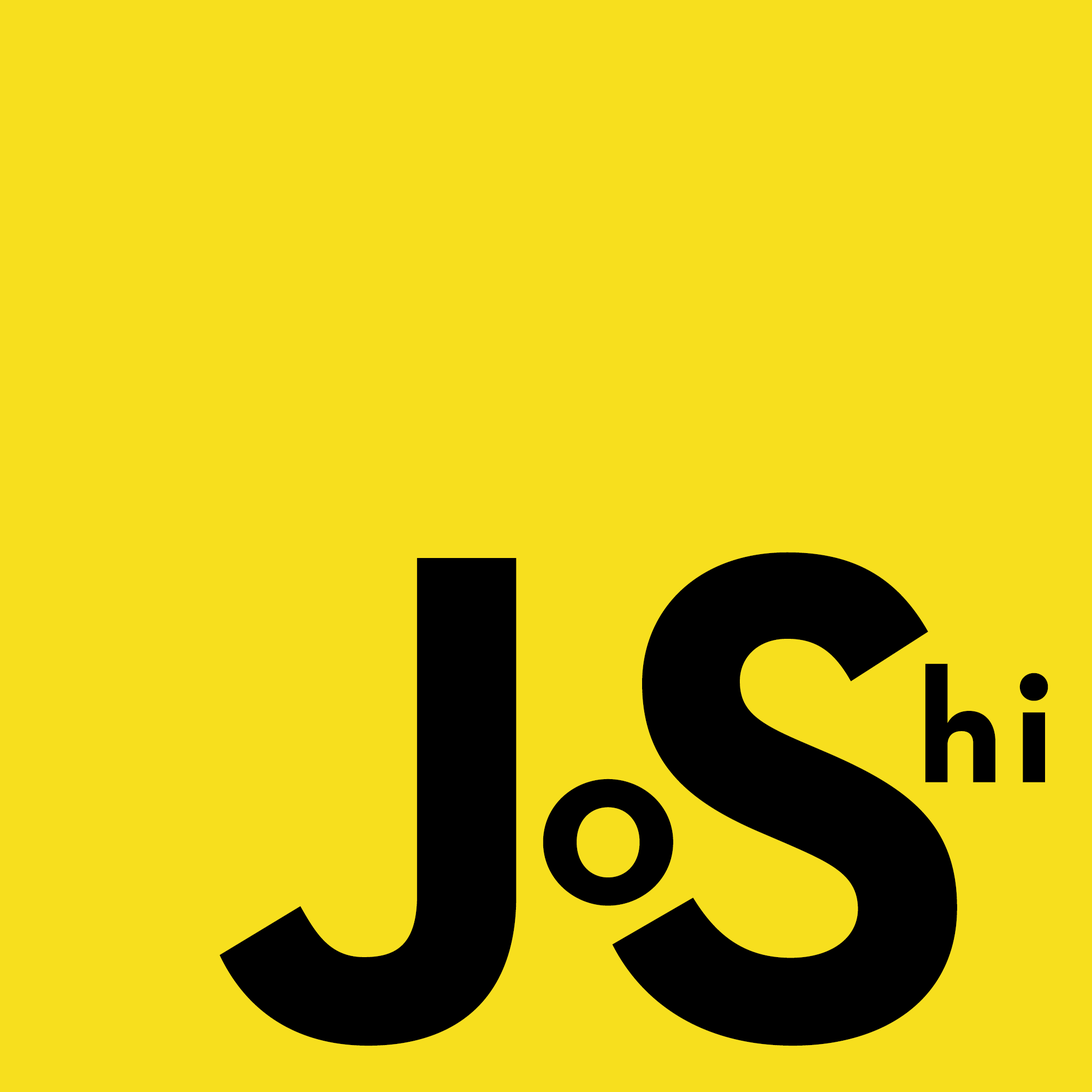
<style>
.page{position:relative;width:1092px;height:1092px;background:#f7df1e}
.page>*{position:absolute;margin:0}
.t1{font:707.6px "NeutraText-Bold";letter-spacing:0.06em;color:#000000}
.t2{font:163.8px "NeutraText-Bold";letter-spacing:0.06em;color:#000000}
.t3{font:234.2px "NeutraText-Bold";color:#000000}
</style>
<div class="page">
<p class="t1" style="left:219px;top:552px;width:738px;height:494px">JS</p>
<p class="t2" style="left:925px;top:663px;width:123px;height:119px">hi</p>
<p class="t3" style="left:543px;top:779px;width:130px;height:127px">0</p>
</div>
